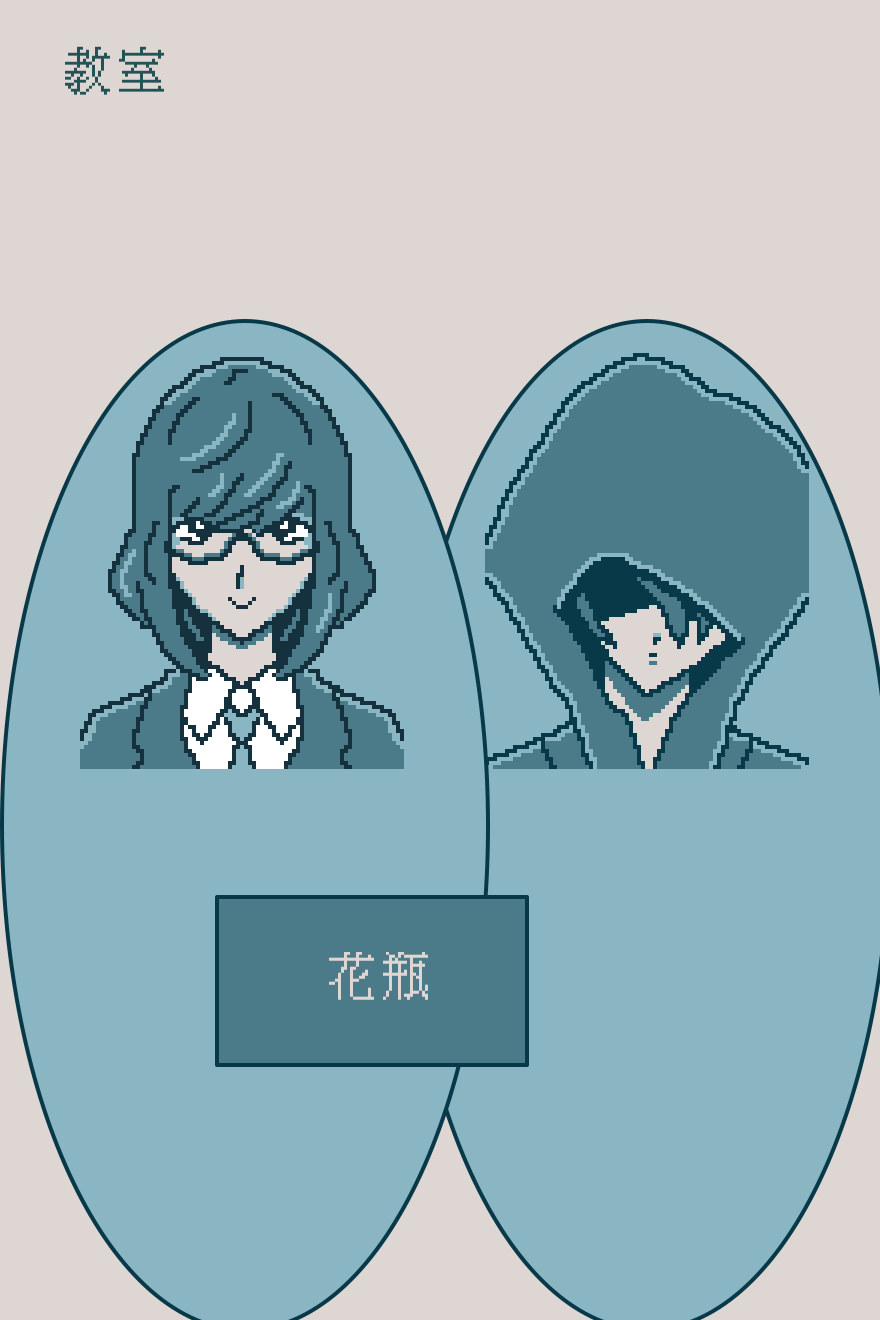
<style>
.page{position:relative;width:880px;height:1320px;background:#8ab6c3}
.page>*{position:absolute;margin:0}
.t1{font:48px "KH-Dot-kagurazaka-16";letter-spacing:0.14em;color:#1e4f5e}
.t2{font:48px "KH-Dot-kagurazaka-16";letter-spacing:0.14em;color:#e0d8d1}
</style>
<div class="page">
<p class="t1" style="left:65px;top:46px;width:99px;height:49px">教室</p>
<p class="t2" style="left:329px;top:952px;width:99px;height:48px">花瓶</p>
</div>
